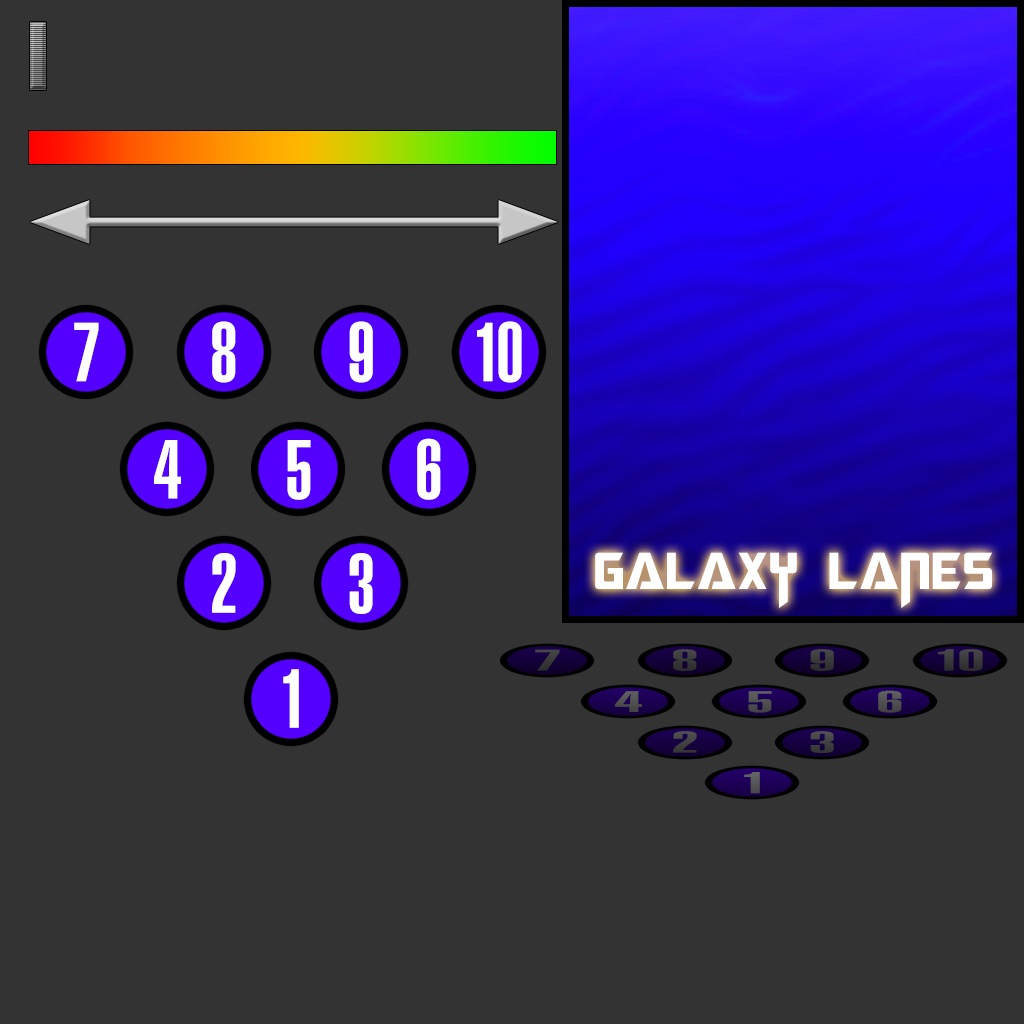
<style>
.page{position:relative;width:1024px;height:1024px;background:#333333}
.page>*{position:absolute;margin:0}
.t1{font:81.2px "LCARS";color:#ffffff;text-transform:uppercase}
.t2{font:51.9px "Megatron";color:#ffffff;text-transform:uppercase}
.t3{font:28.8px "LCARS";color:#3c3c3c;text-transform:uppercase;scale:2.87 1}
.t4{font:28.8px "LCARS";color:#393939;text-transform:uppercase;scale:2.87 1}
.t5{font:28.8px "LCARS";color:#3a3a3a;text-transform:uppercase;scale:2.87 1}
.t6{font:28.8px "LCARS";color:#525151;text-transform:uppercase;scale:2.87 1}
.t7{font:28.8px "LCARS";color:#505050;text-transform:uppercase;scale:2.87 1}
.t8{font:28.8px "LCARS";color:#515151;text-transform:uppercase;scale:2.87 1}
.t9{font:28.8px "LCARS";color:#444444;text-transform:uppercase;scale:2.87 1}
.t10{font:28.8px "LCARS";color:#424141;text-transform:uppercase;scale:2.87 1}
.t11{font:28.8px "LCARS";color:#595858;text-transform:uppercase;scale:2.87 1}
</style>
<div class="page">
<p class="t1" style="left:74px;top:322px;width:25px;height:60px">7</p>
<p class="t1" style="left:212px;top:321px;width:24px;height:62px">8</p>
<p class="t1" style="left:349px;top:321px;width:24px;height:62px">9</p>
<p class="t1" style="left:477px;top:321px;width:45px;height:62px">10</p>
<p class="t1" style="left:417px;top:438px;width:24px;height:62px">6</p>
<p class="t1" style="left:154px;top:440px;width:27px;height:59px">4</p>
<p class="t1" style="left:287px;top:440px;width:24px;height:60px">5</p>
<p class="t1" style="left:212px;top:553px;width:24px;height:60px">2</p>
<p class="t1" style="left:349px;top:553px;width:24px;height:61px">3</p>
<p class="t2" style="left:595px;top:552px;width:397px;height:56px">GALAXY LANES</p>
<p class="t3" style="left:535px;top:649px;width:25px;height:22px">7</p>
<p class="t4" style="left:673px;top:649px;width:24px;height:22px">8</p>
<p class="t5" style="left:810px;top:649px;width:24px;height:22px">9</p>
<p class="t5" style="left:938px;top:649px;width:45px;height:22px">10</p>
<p class="t1" style="left:283px;top:669px;width:16px;height:59px">1</p>
<p class="t6" style="left:615px;top:691px;width:27px;height:21px">4</p>
<p class="t7" style="left:748px;top:691px;width:24px;height:22px">5</p>
<p class="t8" style="left:878px;top:690px;width:24px;height:23px">6</p>
<p class="t9" style="left:673px;top:731px;width:24px;height:22px">2</p>
<p class="t10" style="left:810px;top:731px;width:24px;height:22px">3</p>
<p class="t11" style="left:744px;top:772px;width:16px;height:22px">1</p>
</div>
